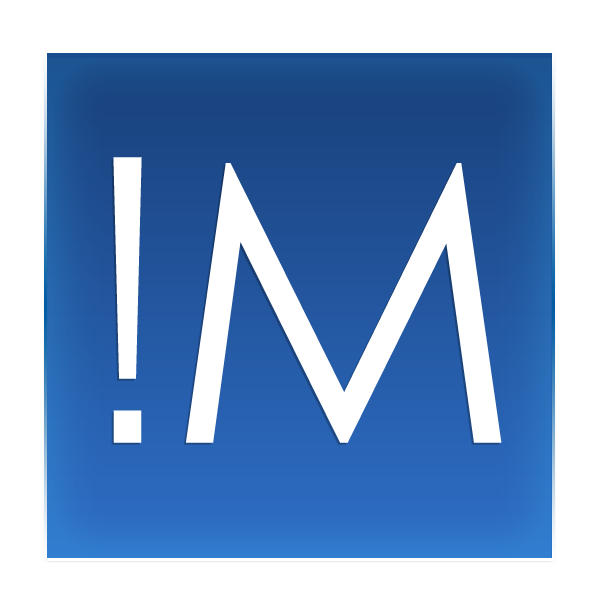
<style>
.page{position:relative;width:600px;height:600px;background:#ffffff}
.page>*{position:absolute;margin:0}
.t1{font:373.4px "AgencyFB-Reg";color:#ffffff}
.t2{font:389px "CenturyGothic";letter-spacing:-0.1em;color:#ffffff}
</style>
<div class="page">
<p class="t1" style="left:113px;top:157px;width:389px;height:286px">!<span class="t2">M</span></p>
</div>
